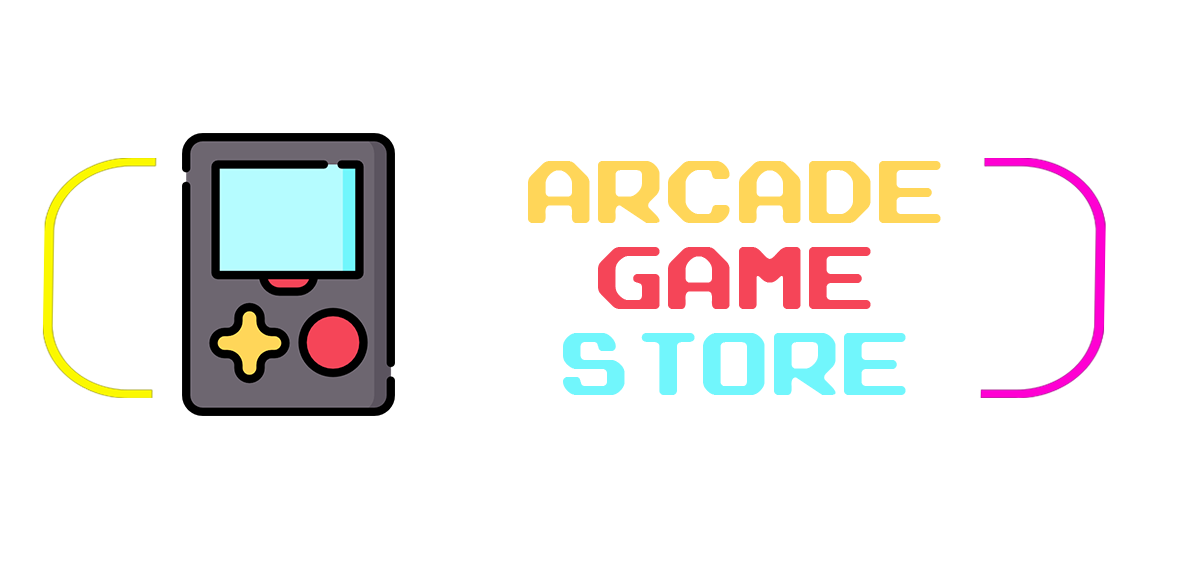
<style>
.page{position:relative;width:1184px;height:564px;background:#ffffff}
.page>*{position:absolute;margin:0}
.t1{font:71.9px "ArcadeRounded";color:#ffd659}
.t2{font:71.9px "ArcadeRounded";color:#f54558}
.t3{font:71.9px "ArcadeRounded";color:#71f6fc}
</style>
<div class="page">
<p class="t1" style="left:528px;top:161px;width:413px;height:234px;text-align:center">arcade <br><span class="t2">game<br></span><span class="t3">store</span></p>
</div>
